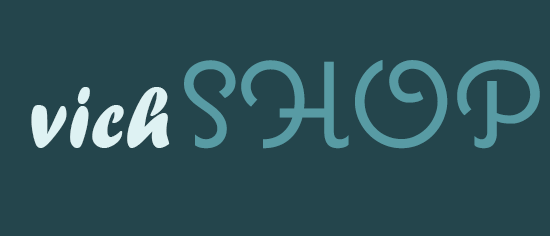
<style>
.page{position:relative;width:550px;height:236px;background:#24454c}
.page>*{position:absolute;margin:0}
.t1{font:120px "Coquette";color:#589ba4}
.t2{font:90px "ForteMT";color:#def2f3}
</style>
<div class="page">
<p class="t1" style="left:184px;top:60px;width:356px;height:89px">SHOP</p>
<p class="t2" style="left:31px;top:87px;width:139px;height:61px">vich</p>
</div>
